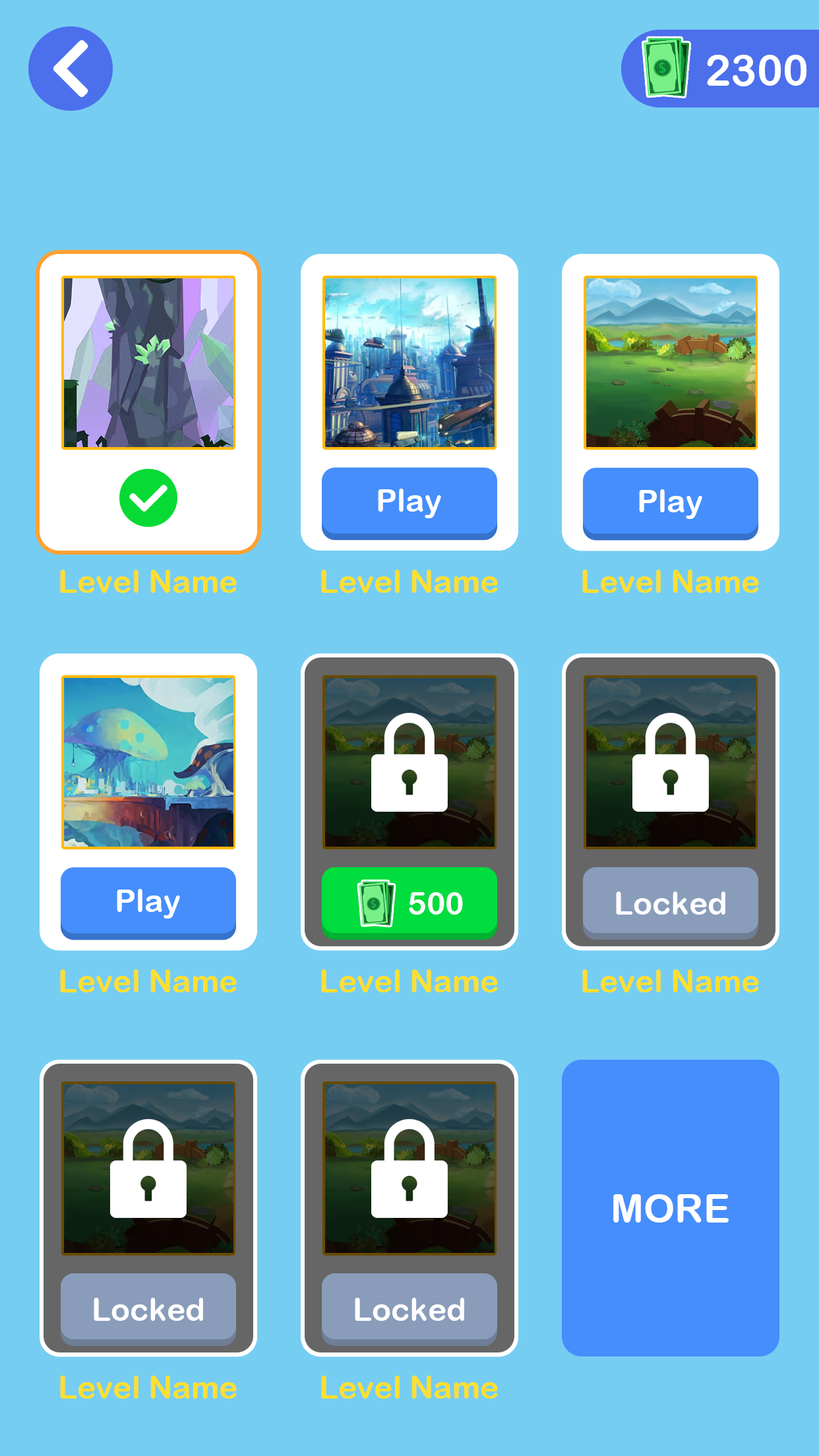
<style>
.page{position:relative;width:819px;height:1456px;background:#76cdf2}
.page>*{position:absolute;margin:0}
.t1{font:43.5px "ArialRoundedMTBold";color:#ffffff}
.t2{font:31.7px "ArialRoundedMTBold";color:#ffffff}
.t3{font:31.7px "ArialRoundedMTBold";color:#ffdf30}
.t4{font:39.6px "ArialRoundedMTBold";color:#ffffff}
</style>
<div class="page">
<p class="t1" style="left:707px;top:55px;width:100px;height:31px">2300</p>
<p class="t2" style="left:378px;top:489px;width:63px;height:29px">Play</p>
<p class="t2" style="left:639px;top:489px;width:63px;height:30px">Play</p>
<p class="t3" style="left:60px;top:570px;width:177px;height:23px">Level Name</p>
<p class="t3" style="left:321px;top:570px;width:177px;height:23px">Level Name</p>
<p class="t3" style="left:582px;top:570px;width:177px;height:23px">Level Name</p>
<p class="t2" style="left:117px;top:889px;width:63px;height:30px">Play</p>
<p class="t2" style="left:409px;top:892px;width:54px;height:23px">500</p>
<p class="t2" style="left:616px;top:892px;width:109px;height:23px">Locked</p>
<p class="t3" style="left:60px;top:969px;width:177px;height:23px">Level Name</p>
<p class="t3" style="left:321px;top:969px;width:177px;height:23px">Level Name</p>
<p class="t3" style="left:582px;top:969px;width:177px;height:23px">Level Name</p>
<p class="t4" style="left:613px;top:1194px;width:116px;height:29px">MORE</p>
<p class="t2" style="left:94px;top:1298px;width:109px;height:23px">Locked</p>
<p class="t2" style="left:355px;top:1298px;width:109px;height:23px">Locked</p>
<p class="t3" style="left:60px;top:1376px;width:177px;height:23px">Level Name</p>
<p class="t3" style="left:321px;top:1376px;width:177px;height:23px">Level Name</p>
</div>
